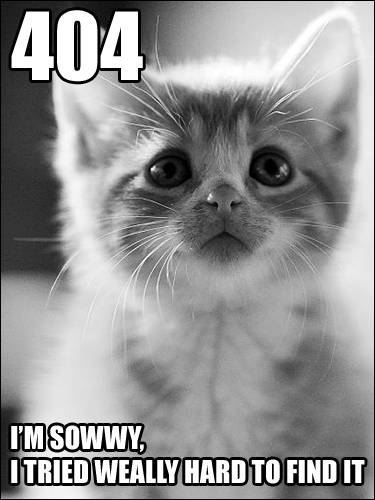
<style>
.page{position:relative;width:375px;height:500px}
.page>*{position:absolute;margin:0}
.t1{font:86.5px "Impact";color:#ffffff}
.t2{font:29.1px "Impact";color:#ffffff}
</style>
<div class="page">
<p class="t1" style="left:11px;top:10px;width:132px;height:72px">404</p>
<p class="t2" style="left:11px;top:425px;width:133px;height:27px">I’M SOWWY,</p>
<p class="t2" style="left:11px;top:459px;width:354px;height:25px">I TRIED WEALLY HARD TO FIND IT</p>
</div>
